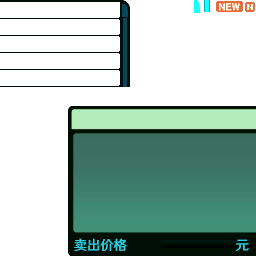
<style>
.page{position:relative;width:256px;height:256px;background:#ffffff}
.page>*{position:absolute;margin:0}
.t1{font:13.3px "HYWenHei-FEW";color:#2fcbdc}
</style>
<div class="page">
<p class="t1" style="left:74px;top:238px;width:53px;height:13px">卖出价格</p>
<p class="t1" style="left:236px;top:239px;width:13px;height:12px">元</p>
</div>
